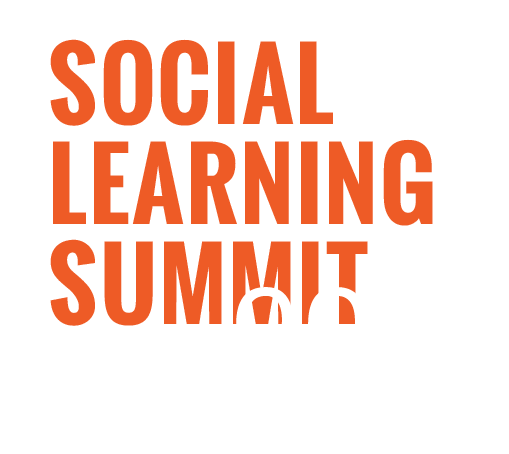
<style>
.page{position:relative;width:509px;height:454px;background:#ffffff}
.page>*{position:absolute;margin:0}
.t1{font:93.9px/100px "Oswald-Bold";letter-spacing:0.02em;color:#ee5b26}
</style>
<div class="page">
<p class="t1" style="left:50px;top:39px;width:383px;height:287px">SOCIAL<br>LEARNING<br>SUMMIT</p>
</div>
